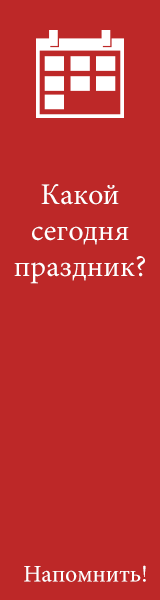
<style>
.page{position:relative;width:160px;height:600px;background:#bd2828}
.page>*{position:absolute;margin:0}
.t1{font:30px/18px "MinionPro-Regular";color:#ffffff}
.t2{font:24px "MinionPro-Regular";color:#ffffff}
</style>
<div class="page">
<p class="t1" style="left:14px;top:184px;width:131px;height:100px;text-align:center">Какой<br><br>сегодня<br><br>праздник?</p>
<p class="t2" style="left:24px;top:565px;width:122px;height:17px">Напомнить!</p>
</div>
